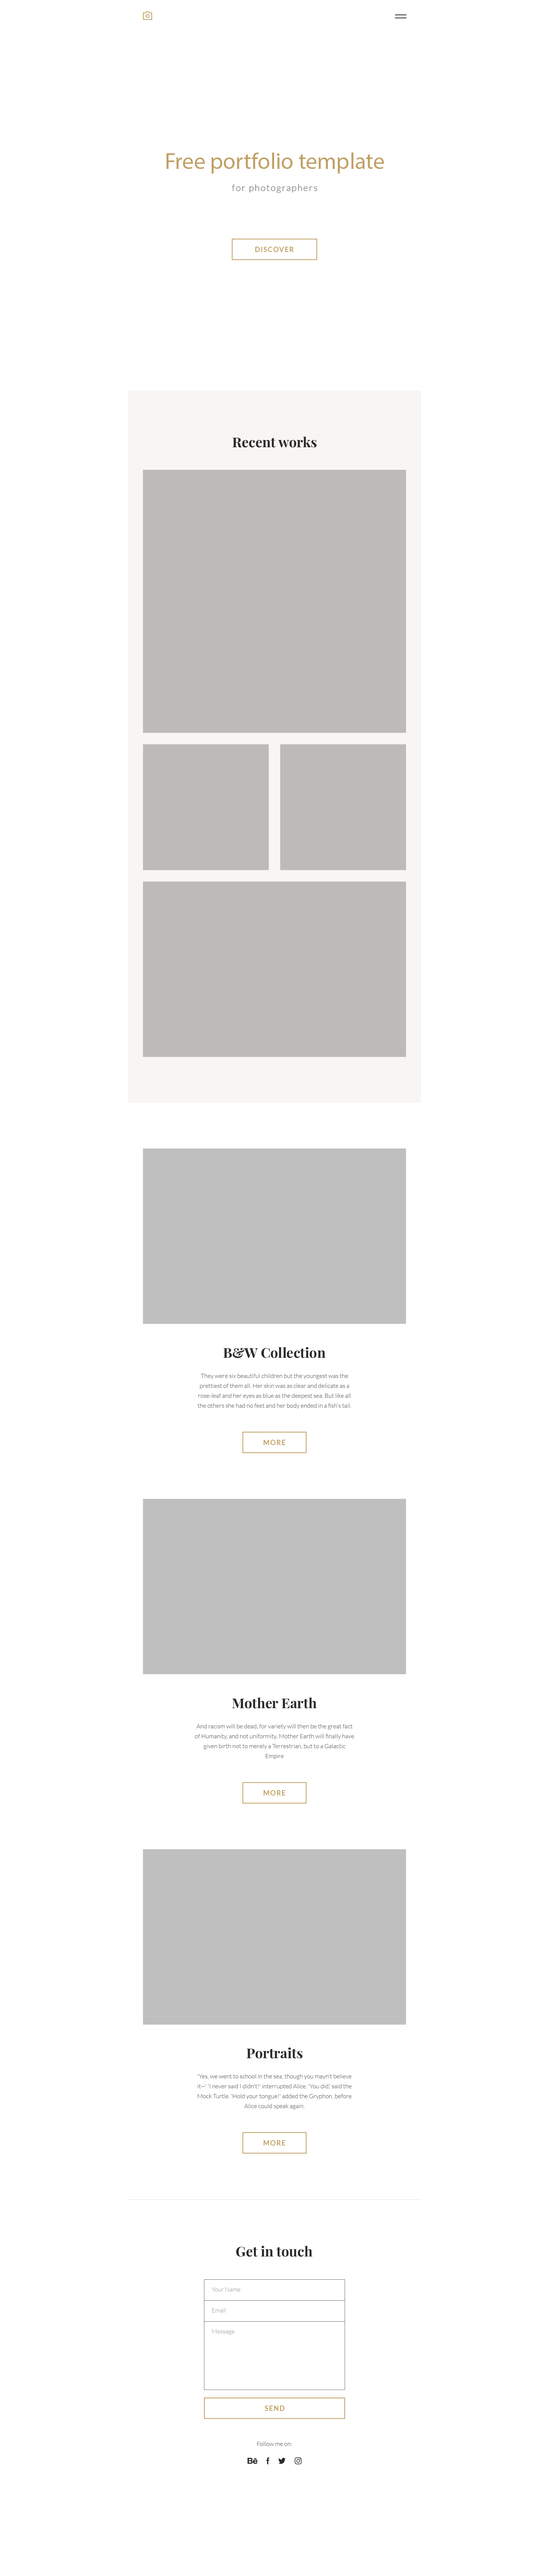
<style>
.page{position:relative;width:549px;height:2576px;background:#ffffff}
.page>*{position:absolute;margin:0}
.t1{font:22.9px "MyriadPro-Regular";color:#c0a064}
.t2{font:9.2px "Lato-Light";letter-spacing:0.1em;color:#6c6a68}
.t3{font:6.9px "Lato-Bold";letter-spacing:0.1em;color:#c0a064;text-transform:uppercase}
.t4{font:13.7px "PlayfairDisplay-Bold";color:#2c2a28}
.t5{font:6.1px/9.9px "Lato-Light";color:#6c6a68}
.t6{font:6.1px "Lato-Light";color:#a8a6a4}
.t7{font:6.1px "Lato-Light";color:#6c6a68}
</style>
<div class="page">
<p class="t1" style="left:166px;top:153px;width:218px;height:20px">Free portfolio template</p>
<p class="t2" style="left:232px;top:184px;width:85px;height:9px">for photographers</p>
<p class="t3" style="left:255px;top:247px;width:39px;height:5px">Discover</p>
<p class="t4" style="left:233px;top:437px;width:84px;height:11px">Recent works</p>
<p class="t4" style="left:223px;top:1347px;width:103px;height:11px">B&amp;W Collection</p>
<p class="t5" style="left:198px;top:1373px;width:153px;height:36px;text-align:center">They were six beautiful children but the youngest was the prettiest of them all. Her skin was as clear and delicate as a rose-leaf and her eyes as blue as the deepest sea. But like all the others she had no feet and her body ended in a fish’s tail.</p>
<p class="t3" style="left:263px;top:1440px;width:22px;height:5px">more</p>
<p class="t4" style="left:232px;top:1698px;width:85px;height:11px">Mother Earth</p>
<p class="t5" style="left:195px;top:1724px;width:159px;height:35px;text-align:center">And racism will be dead, for variety will then be the great fact of Humanity, and not uniformity. Mother Earth will finally have given birth not to merely a Terrestrian, but to a Galactic Empire</p>
<p class="t3" style="left:263px;top:1790px;width:22px;height:5px">more</p>
<p class="t4" style="left:247px;top:2048px;width:56px;height:11px">Portraits</p>
<p class="t5" style="left:198px;top:2074px;width:154px;height:35px;text-align:center">'Yes, we went to school in the sea, though you mayn't believe it—' 'I never said I didn't!' interrupted Alice. 'You did,' said the Mock Turtle. 'Hold your tongue!' added the Gryphon, before Alice could speak again.</p>
<p class="t3" style="left:263px;top:2140px;width:22px;height:6px">more</p>
<p class="t4" style="left:236px;top:2246px;width:77px;height:11px">Get in touch</p>
<p class="t6" style="left:212px;top:2287px;width:29px;height:5px">Your Name</p>
<p class="t6" style="left:212px;top:2308px;width:14px;height:5px">Email</p>
<p class="t6" style="left:212px;top:2329px;width:22px;height:6px">Message</p>
<p class="t3" style="left:265px;top:2406px;width:20px;height:5px">send</p>
<p class="t7" style="left:257px;top:2441px;width:35px;height:5px">Follow me on:</p>
</div>
